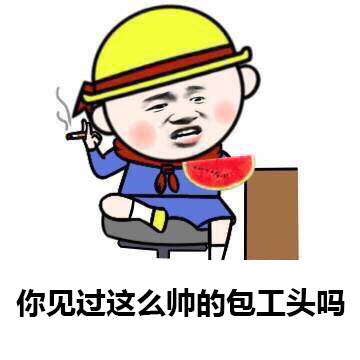
<style>
.page{position:relative;width:360px;height:360px;background:#ffffff}
.page>*{position:absolute;margin:0}
.t1{font:30px "MicrosoftYaHei-Bold";color:#000000}
</style>
<div class="page">
<p class="t1" style="left:16px;top:288px;width:329px;height:29px">你见过这么帅的包工头吗</p>
</div>
